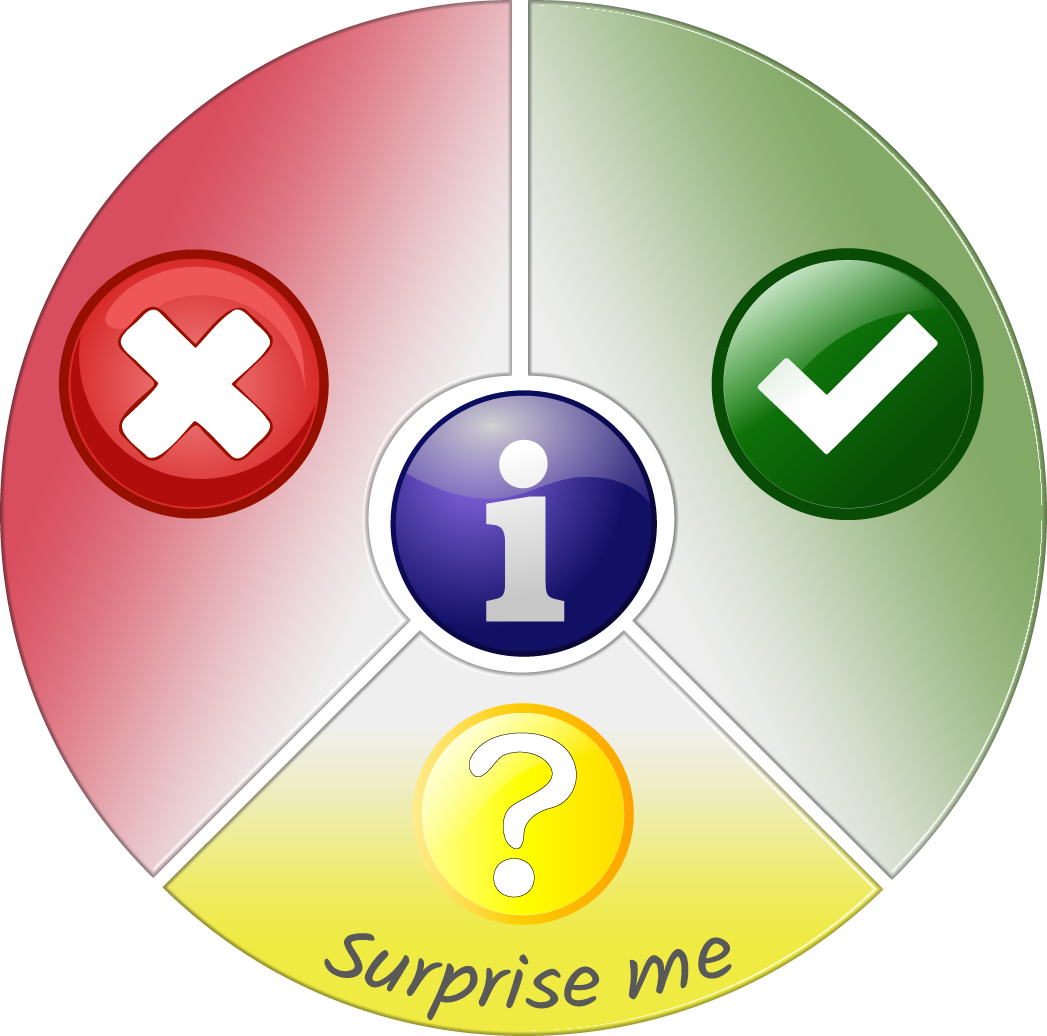
<style>
.page{position:relative;width:1047px;height:1036px;background:#ffffff}
.page>*{position:absolute;margin:0}
.t1{font:78px "Kalam-Regular";letter-spacing:-0.015em;color:#595959}
</style>
<div class="page">
<p class="t1" style="left:324px;top:933px;width:408px;height:88px">Surprise me</p>
</div>
